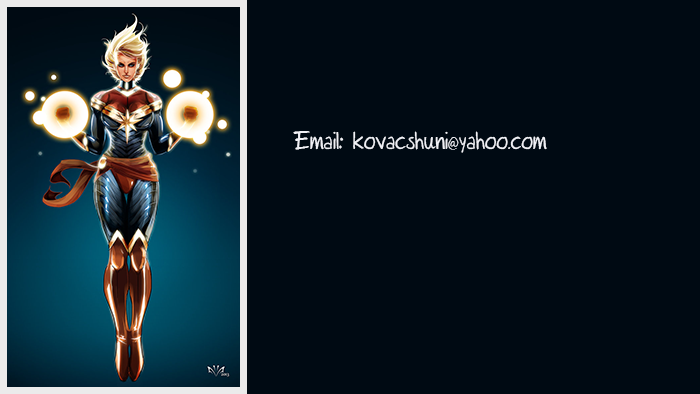
<style>
.page{position:relative;width:700px;height:394px;background:#000a13}
.page>*{position:absolute;margin:0}
.t1{font:24px "RutmerHand";letter-spacing:0.005em;color:#f0f1f6}
</style>
<div class="page">
<p class="t1" style="left:293px;top:131px;width:254px;height:22px">Email: kovacshuni@yahoo.com</p>
</div>
